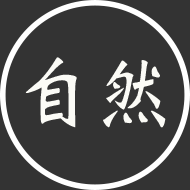
<style>
.page{position:relative;width:190px;height:190px;background:#333333}
.page>*{position:absolute;margin:0}
.t1{font:83.3px "Weibei-TC-Bold";color:#fbfbf6;scale:0.94 1}
</style>
<div class="page">
<p class="t1" style="left:25px;top:57px;width:141px;height:71px">自然</p>
</div>
